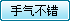
<style>
.page{position:relative;width:70px;height:21px}
.page>*{position:absolute;margin:0}
.t1{font:12px "SimSun";color:#000000}
</style>
<div class="page">
<p class="t1" style="left:11px;top:5px;width:47px;height:11px">手气不错</p>
</div>
